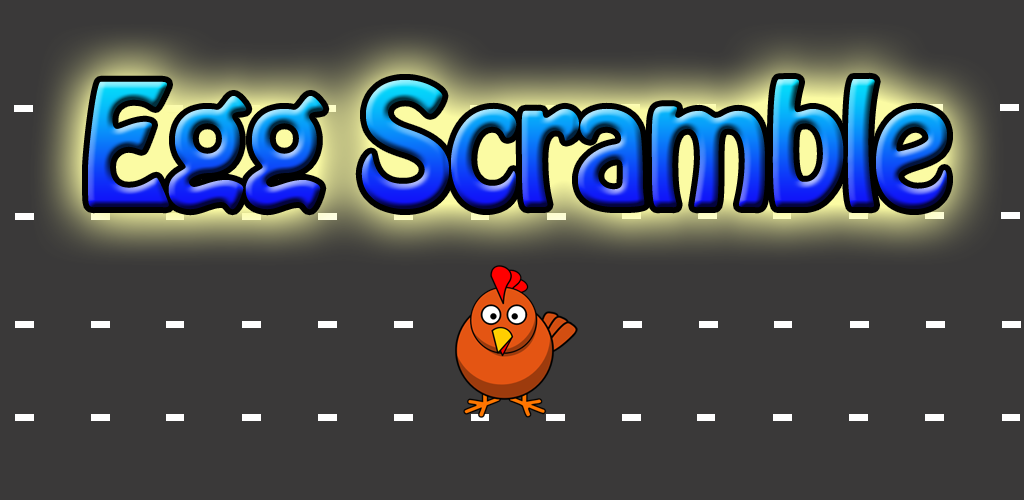
<style>
.page{position:relative;width:1024px;height:500px;background:#3a3939}
.page>*{position:absolute;margin:0}
.t1{font:150px "HoboStd";letter-spacing:-0.04em}
</style>
<div class="page">
<p class="t1" style="left:88px;top:78px;width:859px;height:132px">Egg Scramble</p>
</div>
